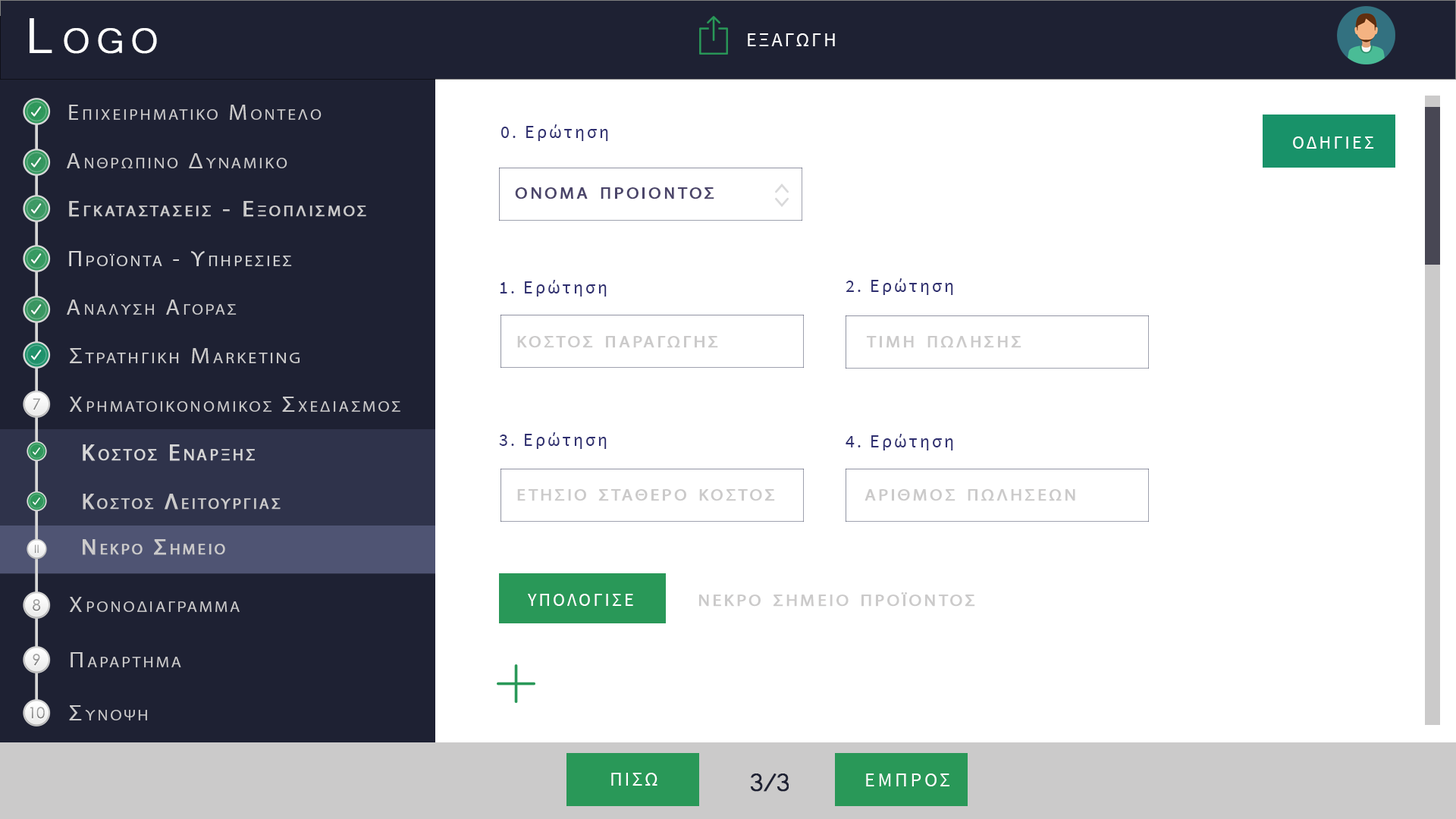
<style>
.page{position:relative;width:1456px;height:819px;background:#ffffff}
.page>*{position:absolute;margin:0}
.t1{font:63.7px "Microsoft-Yi-Baiti";letter-spacing:0.13em;color:#ffffff;font-variant:small-caps;font-weight:bold}
.t2{font:20px "SourceSansPro-Regular";letter-spacing:0.1em;color:#fefefe;text-transform:uppercase}
.t3{font:18.2px "SourceSansPro-Regular";letter-spacing:0.13em;color:#2f2f70}
.t4{font:18.2px "SourceSansPro-Regular";letter-spacing:0.13em;color:#2f2f70;text-transform:uppercase}
.t5{font:18.2px "SourceSansPro-Regular";letter-spacing:0.13em;color:#ffffff;text-transform:uppercase}
.t6{font:23.7px "MyriadPro-Regular";letter-spacing:0.13em;color:#4b456a;font-variant:small-caps;font-weight:bold;scale:1.08 1}
.t7{font:23.7px "MyriadPro-Regular";letter-spacing:0.13em;color:#cbcaca;font-variant:small-caps;font-weight:bold;scale:1.08 1}
.t8{font:32.8px "Microsoft-Yi-Baiti";letter-spacing:-0.1em;color:#1e2133;font-weight:bold}
.t9{font:20px "SourceSansPro-Regular";letter-spacing:0.13em;color:#fefefe;text-transform:uppercase}
</style>
<div class="page">
<p class="t1" style="left:30px;top:18px;width:127px;height:36px">Logo</p>
<p class="t2" style="left:748px;top:33px;width:87px;height:13px">εξαγωγη</p>
<p class="t3" style="left:501px;top:124px;width:107px;height:17px"><span class="t4">0. </span>Ερώτηση</p>
<p class="t5" style="left:1293px;top:136px;width:81px;height:13px">Οδηγιεσ</p>
<p class="t6" style="left:515px;top:187px;width:199px;height:12px">ονομα προιοντοσ</p>
<p class="t3" style="left:500px;top:280px;width:107px;height:17px"><span class="t4">1. </span>Ερώτηση</p>
<p class="t3" style="left:846px;top:278px;width:107px;height:17px"><span class="t4">2. </span>Ερώτηση</p>
<p class="t7" style="left:517px;top:336px;width:201px;height:12px">κοστοσ παραγωγησ</p>
<p class="t7" style="left:866px;top:336px;width:155px;height:12px">τιμη πωλησησ</p>
<p class="t3" style="left:499px;top:432px;width:108px;height:17px"><span class="t4">3. </span>Ερώτηση</p>
<p class="t3" style="left:846px;top:434px;width:107px;height:16px"><span class="t4">4. </span>Ερώτηση</p>
<p class="t7" style="left:517px;top:489px;width:258px;height:12px">ετησιο σταθερο κοστοσ</p>
<p class="t7" style="left:864px;top:489px;width:211px;height:12px">αριθμοσ πωλησεων</p>
<p class="t5" style="left:528px;top:594px;width:105px;height:12px">υπολογισε</p>
<p class="t7" style="left:698px;top:592px;width:277px;height:15px">νεκρο σημειο προϊοντοσ</p>
<p class="t2" style="left:611px;top:773px;width:46px;height:13px">Πισω</p>
<p class="t8" style="left:750px;top:773px;width:39px;height:19px">3/3</p>
<p class="t9" style="left:866px;top:773px;width:83px;height:13px">εμπροσ</p>
</div>
